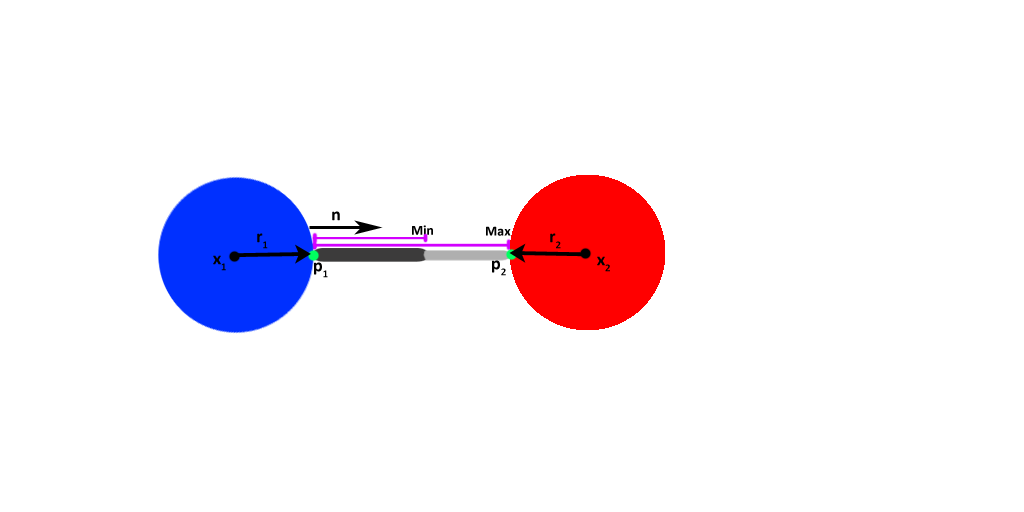
<style>
.page{position:relative;width:1024px;height:512px;background:#ffffff}
.page>*{position:absolute;margin:0}
.t1{font:18px "Calibri-Bold";color:#000000}
.t2{font:14px "Calibri-Bold";color:#000000}
</style>
<div class="page">
<p class="t1" style="left:332px;top:211px;width:8px;height:10px">n</p>
<p class="t1" style="left:257px;top:233px;width:11px;height:16px">r1</p>
<p class="t2" style="left:412px;top:225px;width:21px;height:10px">Min</p>
<p class="t2" style="left:486px;top:226px;width:25px;height:10px">Max</p>
<p class="t1" style="left:550px;top:233px;width:11px;height:16px">r2</p>
<p class="t1" style="left:213px;top:255px;width:13px;height:16px">x1</p>
<p class="t1" style="left:597px;top:256px;width:13px;height:16px">x2</p>
<p class="t1" style="left:314px;top:262px;width:14px;height:16px">p1</p>
<p class="t1" style="left:492px;top:260px;width:14px;height:16px">p2</p>
</div>
